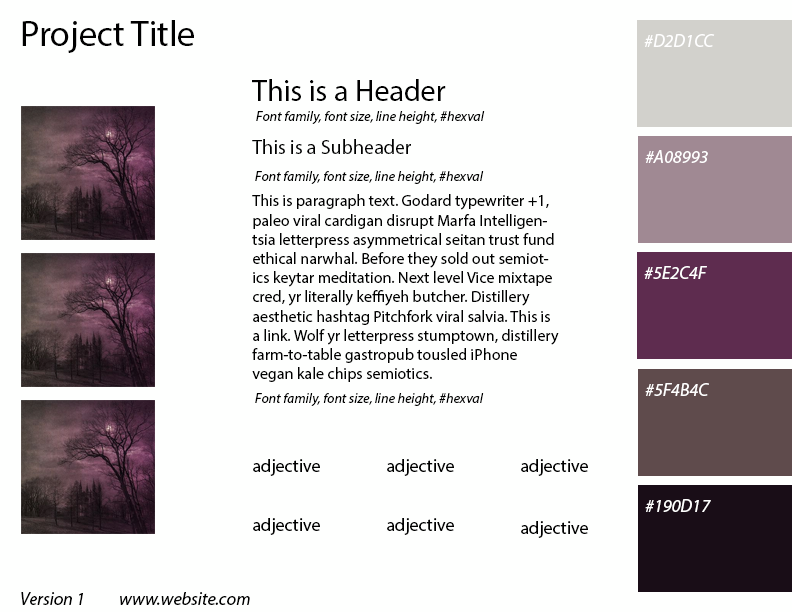
<style>
.page{position:relative;width:792px;height:612px;background:#fefffe}
.page>*{position:absolute;margin:0}
.t1{font:36px "MyriadPro-Regular";color:#000000}
.t2{font:18px "MyriadPro-It";color:#ffffff}
.t3{font:30px "MyriadPro-Regular";color:#000000}
.t4{font:14px "MyriadPro-It";color:#000000}
.t5{font:20px "MyriadPro-Regular";color:#000000}
.t6{font:16px "MyriadPro-Regular";color:#000000}
.t7{font:18px "MyriadPro-Regular";color:#000000}
.t8{font:18px "MyriadPro-It";color:#000000}
</style>
<div class="page">
<p class="t1" style="left:22px;top:20px;width:172px;height:33px">Project Title</p>
<p class="t2" style="left:644px;top:34px;width:71px;height:13px">#D2D1CC</p>
<p class="t3" style="left:252px;top:79px;width:194px;height:22px">This is a Header</p>
<p class="t4" style="left:256px;top:111px;width:229px;height:13px">Font family, font size, line height, #hexval</p>
<p class="t5" style="left:252px;top:139px;width:159px;height:15px">This is a Subheader</p>
<p class="t2" style="left:645px;top:150px;width:63px;height:13px">#A08993</p>
<p class="t4" style="left:255px;top:171px;width:229px;height:13px">Font family, font size, line height, #hexval</p>
<p class="t6" style="left:252px;top:194px;width:307px;height:188px">This is paragraph text. Godard typewriter +1, paleo viral cardigan disrupt Marfa Intelligentsia letterpress asymmetrical seitan trust fund ethical narwhal. Before they sold out semiotics keytar meditation. Next level Vice mixtape cred, yr literally keffiyeh butcher. Distillery aesthetic hashtag Pitchfork viral salvia. This is a link. Wolf yr letterpress stumptown, distillery farm-to-table gastropub tousled iPhone vegan kale chips semiotics.</p>
<p class="t2" style="left:644px;top:266px;width:63px;height:13px">#5E2C4F</p>
<p class="t2" style="left:645px;top:383px;width:64px;height:13px">#5F4B4C</p>
<p class="t4" style="left:255px;top:393px;width:229px;height:13px">Font family, font size, line height, #hexval</p>
<p class="t7" style="left:253px;top:459px;width:67px;height:17px">adjective</p>
<p class="t7" style="left:387px;top:459px;width:67px;height:17px">adjective</p>
<p class="t7" style="left:521px;top:459px;width:67px;height:17px">adjective</p>
<p class="t2" style="left:645px;top:499px;width:66px;height:13px">#190D17</p>
<p class="t7" style="left:253px;top:518px;width:67px;height:17px">adjective</p>
<p class="t7" style="left:387px;top:518px;width:67px;height:17px">adjective</p>
<p class="t7" style="left:521px;top:521px;width:67px;height:17px">adjective</p>
<p class="t8" style="left:21px;top:592px;width:62px;height:13px">Version 1</p>
<p class="t8" style="left:120px;top:592px;width:130px;height:13px">www.website.com</p>
</div>
